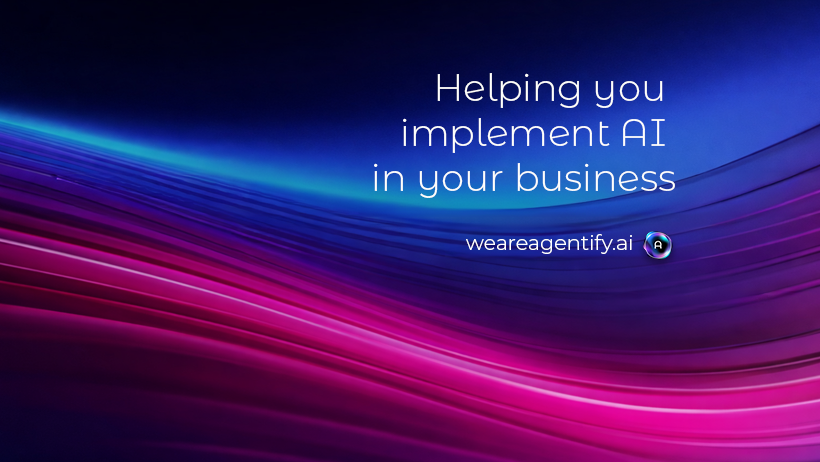
<style>
.page{position:relative;width:820px;height:462px}
.page>*{position:absolute;margin:0}
.t1{font:37.5px "MontserratAlternates-Light";color:#fefefc}
.t2{font:20.8px "Montserrat-Light";color:#ffffff}
</style>
<div class="page">
<p class="t1" style="left:374px;top:73px;width:301px;height:125px;text-align:right">Helping you <br>implement AI <br>in your business</p>
<p class="t2" style="left:466px;top:234px;width:166px;height:20px">weareagentify.ai</p>
</div>
